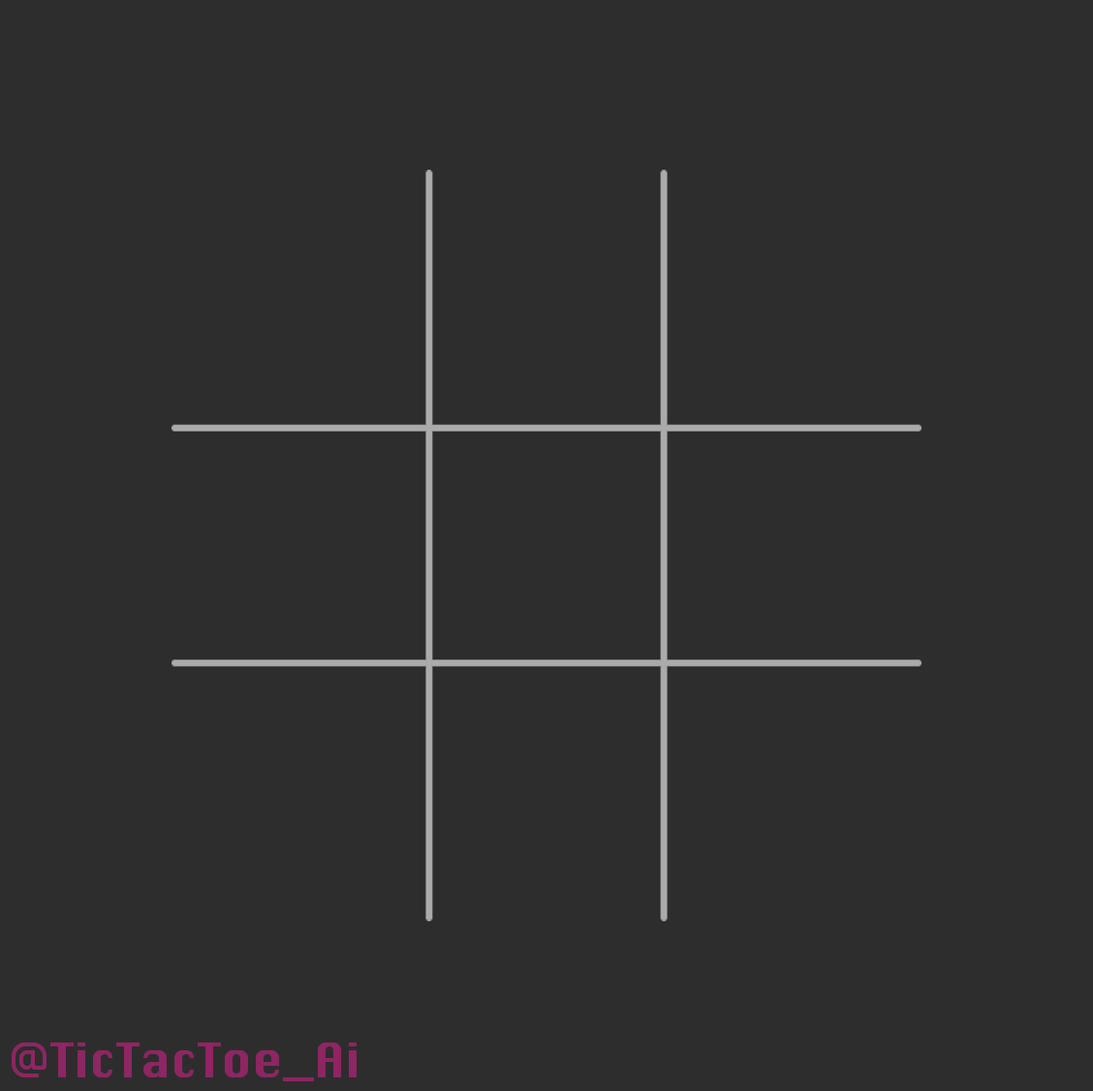
<style>
.page{position:relative;width:1093px;height:1091px;background:#2d2d2d}
.page>*{position:absolute;margin:0}
.t1{font:46.5px "Silom";color:#8d2663}
</style>
<div class="page">
<p class="t1" style="left:12px;top:1042px;width:345px;height:39px">@TicTacToe_Ai</p>
</div>
